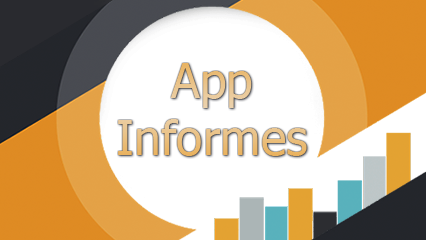
<style>
.page{position:relative;width:426px;height:240px;background:#ffffff}
.page>*{position:absolute;margin:0}
.t1{font:48px "Tahoma";letter-spacing:0.004em}
</style>
<div class="page">
<p class="t1" style="left:118px;top:63px;width:189px;height:93px;text-align:center">App<br>Informes</p>
</div>
